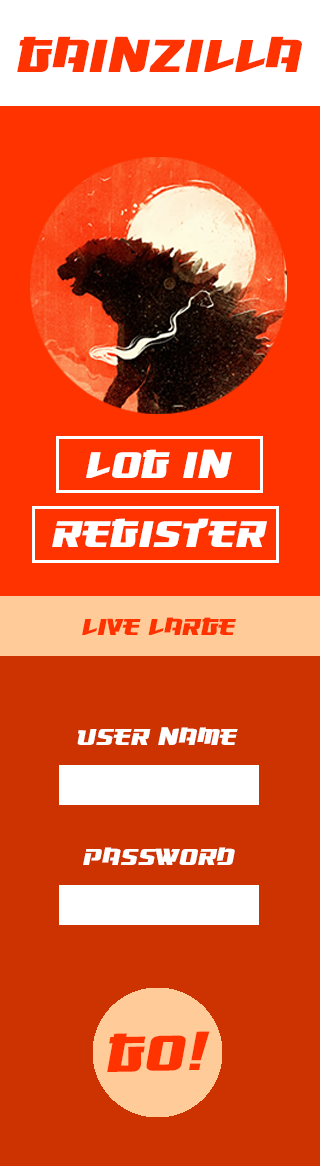
<style>
.page{position:relative;width:320px;height:1166px;background:#cc3300}
.page>*{position:absolute;margin:0}
.t1{font:60px "Osaka-SansSerif";color:#ff3300}
.t2{font:48px "Osaka-SansSerif";color:#ffffff}
.t3{font:30px "Osaka-SansSerif";color:#ff3300}
.t4{font:30px "Osaka-SansSerif";color:#ffffff}
.t5{font:65.2px "Osaka-SansSerif";color:#ff3300}
</style>
<div class="page">
<p class="t1" style="left:17px;top:36px;width:285px;height:36px">Gainzilla</p>
<p class="t2" style="left:86px;top:449px;width:146px;height:29px">LOG IN</p>
<p class="t2" style="left:52px;top:518px;width:215px;height:29px">register</p>
<p class="t3" style="left:82px;top:617px;width:154px;height:18px">Live Large</p>
<p class="t4" style="left:77px;top:727px;width:161px;height:18px">User Name</p>
<p class="t4" style="left:83px;top:847px;width:152px;height:18px">Password</p>
<p class="t5" style="left:107px;top:1031px;width:103px;height:41px;rotate:-1deg">GO!</p>
</div>
